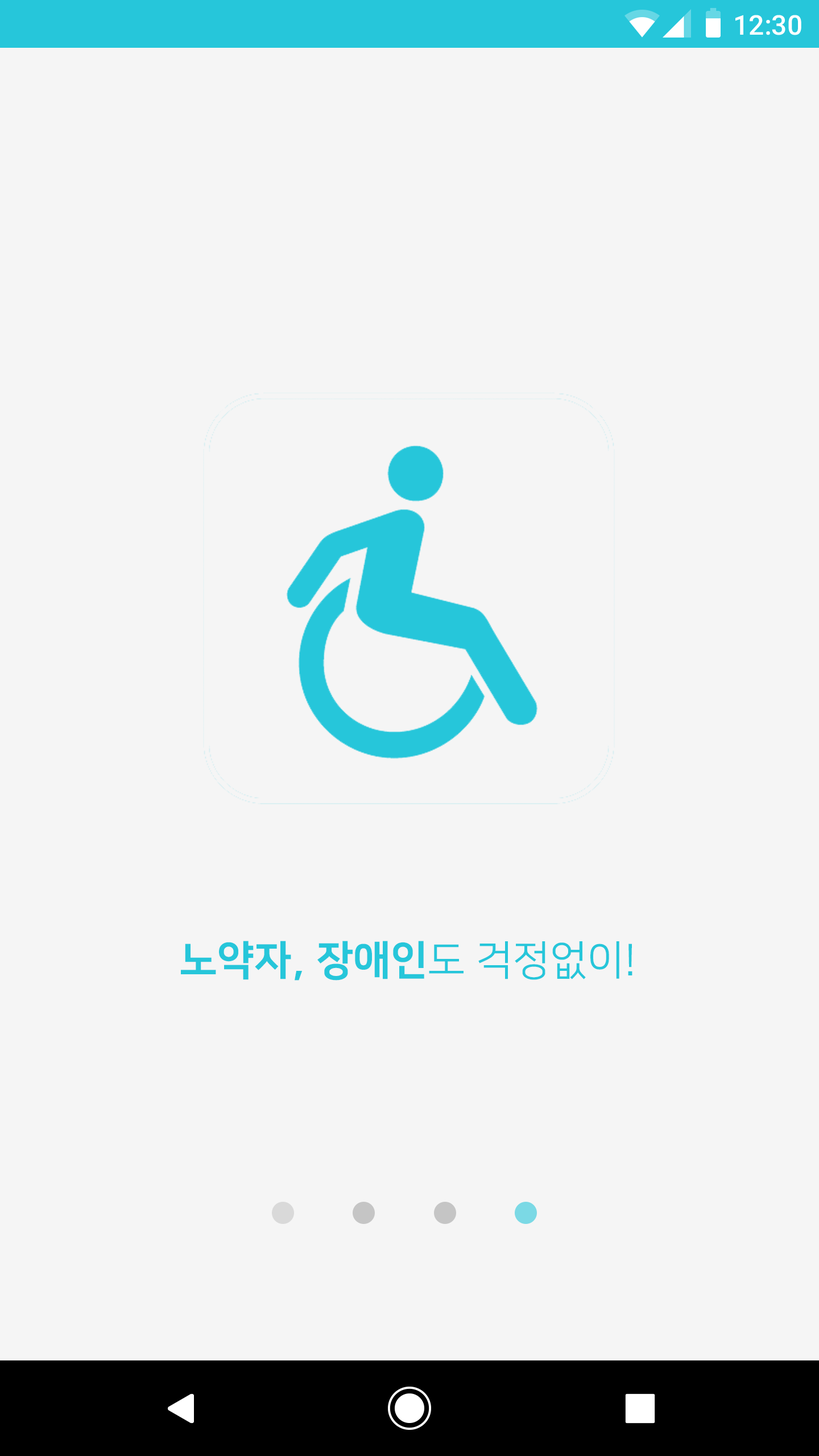
<style>
.page{position:relative;width:819px;height:1456px;background:#f5f5f5}
.page>*{position:absolute;margin:0}
.t1{font:27.3px "Roboto-Medium";color:#ffffff}
.t2{font:40.9px "NanumSquareEB";color:#26c6da}
.t3{font:40.9px "NanumSquareR";color:#26c6da}
</style>
<div class="page">
<p class="t1" style="left:735px;top:15px;width:66px;height:20px">12:30</p>
<p class="t2" style="left:181px;top:941px;width:451px;height:40px">노약자, 장애인<span class="t3">도 걱정없이!</span></p>
</div>
